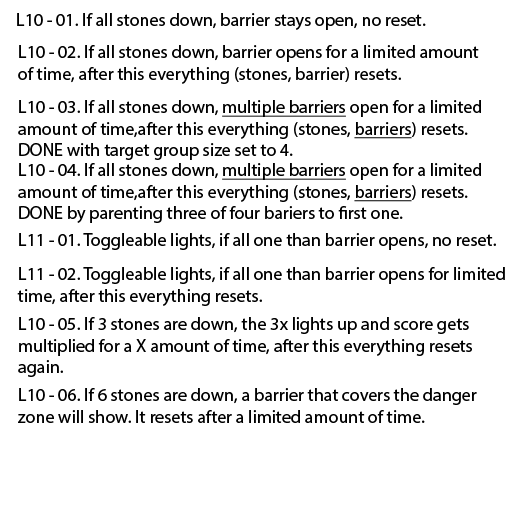
<style>
.page{position:relative;width:512px;height:512px;background:#ffffff}
.page>*{position:absolute;margin:0}
.t1{font:18px "MyriadPro-Regular";color:#000000}
.t2{font:18px "MyriadPro-Regular";color:#000000;text-decoration:underline}
</style>
<div class="page">
<p class="t1" style="left:17px;top:13px;width:409px;height:17px">L10 - 01. If all stones down, barrier stays open, no reset.</p>
<p class="t1" style="left:18px;top:45px;width:461px;height:39px">L10 - 02. If all stones down, barrier opens for a limited amount <br>of time, after this everything (stones, barrier) resets.</p>
<p class="t1" style="left:18px;top:100px;width:463px;height:60px">L10 - 03. If all stones down, <span class="t2">multiple barriers</span> open for a limited <br>amount of time,after this everything (stones, <span class="t2">barriers</span>) resets.<br>DONE with target group size set to 4.</p>
<p class="t1" style="left:18px;top:163px;width:463px;height:60px">L10 - 04. If all stones down, <span class="t2">multiple barriers</span> open for a limited <br>amount of time,after this everything (stones, <span class="t2">barriers</span>) resets.<br>DONE by parenting three of four bariers to first one.</p>
<p class="t1" style="left:19px;top:233px;width:477px;height:17px">L11 - 01. Toggleable lights, if all one than barrier opens, no reset.</p>
<p class="t1" style="left:17px;top:267px;width:488px;height:39px">L11 - 02. Toggleable lights, if all one than barrier opens for limited <br>time, after this everything resets.</p>
<p class="t1" style="left:18px;top:317px;width:454px;height:60px">L10 - 05. If 3 stones are down, the 3x lights up and score gets<br>multiplied for a X amount of time, after this everything resets <br>again.</p>
<p class="t1" style="left:18px;top:388px;width:459px;height:35px">L10 - 06. If 6 stones are down, a barrier that covers the danger <br>zone will show. It resets after a limited amount of time.</p>
</div>
